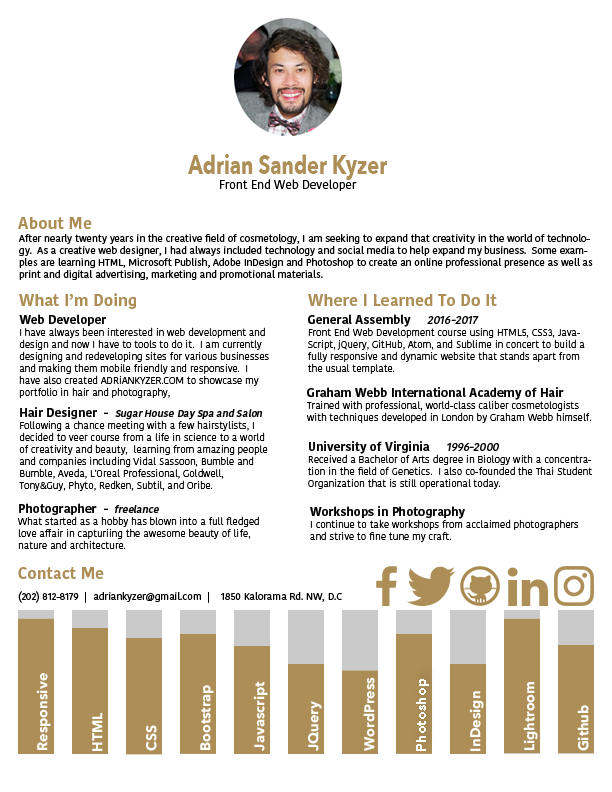
<style>
.page{position:relative;width:612px;height:792px;background:#ffffff}
.page>*{position:absolute;margin:0}
.t1{font:27px "AvenirNext-Bold";color:#ac8e56;scale:0.74 1}
.t2{font:12px "KohinoorBangla-Regular";color:#000000}
.t3{font:16px "KohinoorBangla-Bold";color:#ac8e56}
.t4{font:10px "KohinoorBangla-Regular";color:#000000}
.t5{font:10px "KohinoorBangla-Light";color:#000000}
.t6{font:12px "KohinoorBangla-Bold";color:#000000}
.t7{font:12px "KohinoorBangla-Medium";color:#000000;font-style:italic}
.t8{font:10px "KohinoorBangla-Semibold";color:#000000;font-style:italic}
.t9{font:14px "AvenirNext-Bold";color:#ffffff}
</style>
<div class="page">
<p class="t1" style="left:188px;top:154px;width:200px;height:26px">Adrian Sander Kyzer</p>
<p class="t2" style="left:220px;top:179px;width:137px;height:12px">Front End Web Developer</p>
<p class="t3" style="left:18px;top:217px;width:74px;height:12px">About Me</p>
<p class="t4" style="left:18px;top:234px;width:575px;height:46px">After nearly twenty years in the creative field of cosmetology, I am seeking to expand that creativity in the world of technology.  As a creative web designer, I had always included technology and social media to help expand my business.  Some examples are learning HTML, Microsoft Publish, Adobe InDesign and Photoshop to create an online professional presence as well as print and digital advertising, marketing and promotional materials.</p>
<p class="t3" style="left:19px;top:293px;width:117px;height:16px">What I’m Doing</p>
<p class="t3" style="left:308px;top:294px;width:189px;height:12px">Where I Learned To Do It</p>
<p class="t5" style="left:19px;top:314px;width:250px;height:84px"><span class="t6">Web Developer<br></span>I have always been interested in web development and design and now I have to tools to do it.  I am currently designing and redeveloping sites for various businesses and making them mobile friendly and responsive.  I have also created ADRiANKYZER.COM to showcase my portfolio in hair and photography,</p>
<p class="t5" style="left:308px;top:314px;width:277px;height:60px"><span class="t6">General Assembly     </span><span class="t7">2016-2017<br></span>Front End Web Development course using HTML5, CSS3, Java-Script, jQuery, GitHub, Atom, and Sublime in concert to build a fully responsive and dynamic website that stands apart from the usual template.</p>
<p class="t5" style="left:307px;top:387px;width:285px;height:36px"><span class="t6">Graham Webb International Academy of Hair</span><br>Trained with professional, world-class caliber cosmetologists with techniques developed in London by Graham Webb himself.</p>
<p class="t5" style="left:19px;top:407px;width:249px;height:84px"><span class="t6">Hair Designer  -  </span><span class="t8">Sugar House Day Spa and Salon<br></span>Following a chance meeting with a few hairstylists, I decided to veer course from a life in science to a world of creativity and beauty,  learning from amazing people and companies including Vidal Sassoon, Bumble and Bumble, Aveda, L'Oreal Professional, Goldwell, Tony&amp;Guy, Phyto, Redken, Subtil, and Oribe.</p>
<p class="t5" style="left:308px;top:441px;width:284px;height:48px"><span class="t6">University of Virginia     </span><span class="t7">1996-2000<br></span>Received a Bachelor of Arts degree in Biology with a concentration in the field of Genetics.  I also co-founded the Thai Student Organization that is still operational today.</p>
<p class="t5" style="left:18px;top:503px;width:241px;height:46px"><span class="t6">Photographer  -  </span><span class="t8">freelance<br></span>What started as a hobby has blown into a full fledged love affair in capturiing the awesome beauty of life, nature and architecture.</p>
<p class="t5" style="left:310px;top:506px;width:269px;height:36px"><span class="t6">Workshops in Photography<br></span>I continue to take workshops from acclaimed photographers and strive to fine tune my craft.</p>
<p class="t3" style="left:18px;top:567px;width:86px;height:12px">Contact Me</p>
<p class="t4" style="left:18px;top:591px;width:68px;height:12px">(202) 812-8179  |</p>
<p class="t4" style="left:93px;top:592px;width:116px;height:11px">adriankyzer@gmail.com  |</p>
<p class="t4" style="left:220px;top:592px;width:122px;height:10px">1850 Kalorama Rd. NW, D.C</p>
<p class="t9" style="left:36px;top:673px;width:15px;height:77px;rotate:-90deg">Responsive</p>
<p class="t9" style="left:363px;top:677px;width:12px;height:74px;rotate:-90deg">WordPress</p>
<p class="t9" style="left:200px;top:685px;width:14px;height:65px;rotate:-90deg">Bootstrap</p>
<p class="t9" style="left:253px;top:681px;width:15px;height:70px;rotate:-90deg">Javascript</p>
<p class="t9" style="left:416px;top:679px;width:13px;height:72px;rotate:-90deg">Photoshop</p>
<p class="t9" style="left:523px;top:682px;width:15px;height:68px;rotate:-90deg">Lightroom</p>
<p class="t9" style="left:308px;top:701px;width:14px;height:50px;rotate:-90deg">JQuery</p>
<p class="t9" style="left:469px;top:691px;width:15px;height:60px;rotate:-90deg">InDesign</p>
<p class="t9" style="left:92px;top:713px;width:11px;height:38px;rotate:-90deg">HTML</p>
<p class="t9" style="left:577px;top:705px;width:12px;height:46px;rotate:-90deg">Github</p>
<p class="t9" style="left:146px;top:725px;width:11px;height:26px;rotate:-90deg">CSS</p>
</div>
